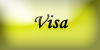
<style>
.page{position:relative;width:100px;height:50px}
.page>*{position:absolute;margin:0}
.t1{font:20px "MonotypeCorsiva";color:#0f0108;font-weight:bold}
</style>
<div class="page">
<p class="t1" style="left:34px;top:14px;width:34px;height:15px">Visa</p>
</div>
